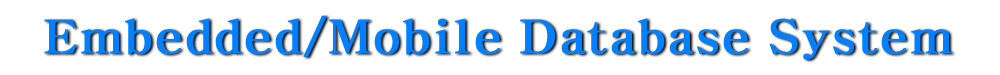
<style>
.page{position:relative;width:1000px;height:75px;background:#ffffff}
.page>*{position:absolute;margin:0}
.t1{font:45.8px "H2mjrE";color:#0080ff;font-weight:bold}
</style>
<div class="page">
<p class="t1" style="left:44px;top:15px;width:908px;height:45px">Embedded/Mobile Database System</p>
</div>
